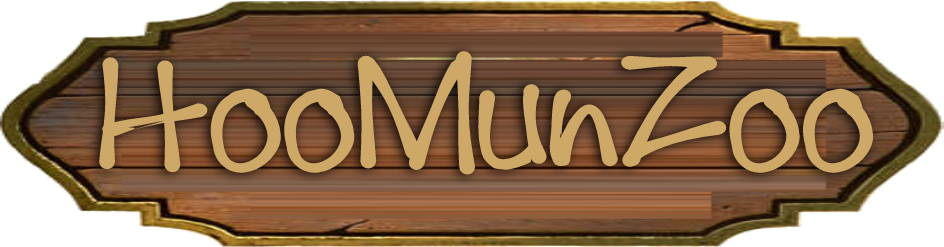
<style>
.page{position:relative;width:944px;height:247px}
.page>*{position:absolute;margin:0}
.t1{font:179.7px "!PaulMaul-Bold";color:#cea867;scale:1.07 1}
</style>
<div class="page">
<p class="t1" style="left:99px;top:51px;width:775px;height:124px">HooMunZoo</p>
</div>
